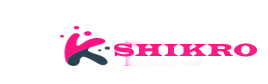
<style>
.page{position:relative;width:268px;height:84px;background:#ffffff}
.page>*{position:absolute;margin:0}
.t1{font:18px "LatinWide";color:#fa1c85}
</style>
<div class="page">
<p class="t1" style="left:114px;top:43px;width:143px;height:14px">SHIKRO</p>
</div>
